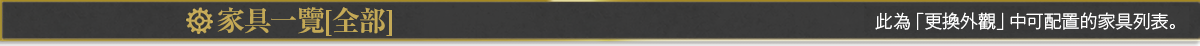
<style>
.page{position:relative;width:1200px;height:46px}
.page>*{position:absolute;margin:0}
.t1{font:28px "RyuminPr6N-ExBold";color:#c4a956}
.t2{font:18px "GothicMB101Pr6N-Light";color:#ffffff}
</style>
<div class="page">
<p class="t1" style="left:217px;top:7px;width:175px;height:29px">家具一覽[全部]</p>
<p class="t2" style="left:875px;top:12px;width:300px;height:18px">此為「更換外觀」中可配置的家具列表。</p>
</div>
